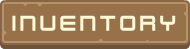
<style>
.page{position:relative;width:190px;height:49px;background:#97714a}
.page>*{position:absolute;margin:0}
.t1{font:24px "KenVector-Future";color:#fff9d9}
</style>
<div class="page">
<p class="t1" style="left:12px;top:15px;width:164px;height:16px">inventory</p>
</div>
